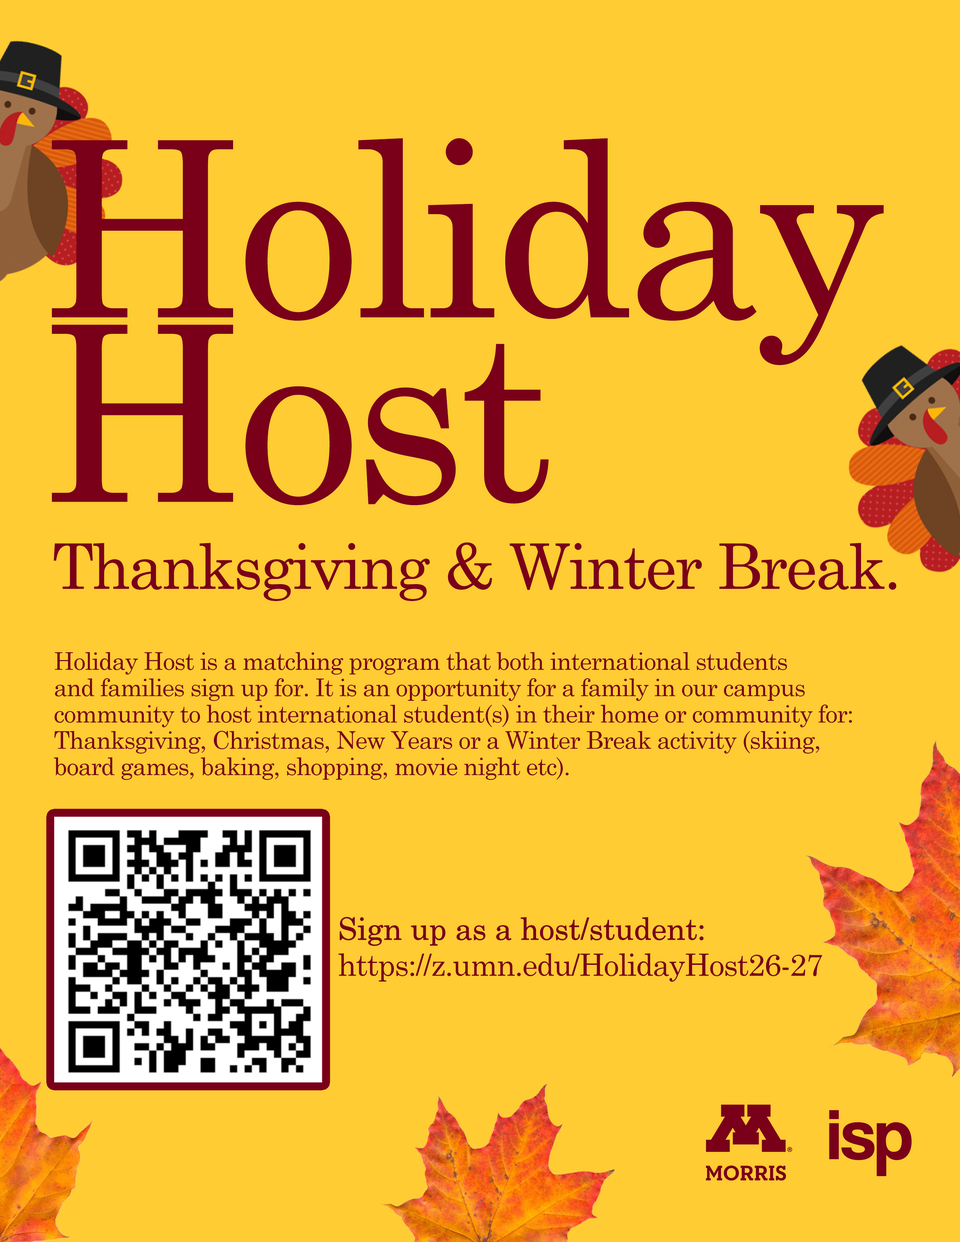
<style>
.page{position:relative;width:960px;height:1242px;background:#ffcc33}
.page>*{position:absolute;margin:0}
.t1{font:245.1px/184.6px "CenturySchoolbook";letter-spacing:-0.03em;color:#7a0019}
.t2{font:62.8px "CenturySchoolbook";letter-spacing:-0.03em;color:#7a0019}
.t3{font:24.4px/26.3px "CenturySchoolbook";letter-spacing:-0.03em;color:#7a0019}
.t4{font:30.8px/36px "CenturySchoolbook";letter-spacing:-0.03em;color:#7a0019}
.t5{font:30.8px/36px "CenturySchoolbook";letter-spacing:-0.03em;color:#7a0019;font-weight:bold}
.t6{font:72.7px "CoolveticaRg-Regular";letter-spacing:-0.03em;color:#7a0019;font-weight:bold}
</style>
<div class="page">
<p class="t1" style="left:52px;top:138px;width:832px;height:368px">Holiday<br>Host</p>
<p class="t2" style="left:53px;top:542px;width:843px;height:59px">Thanksgiving &amp; Winter Break.</p>
<p class="t3" style="left:54px;top:652px;width:798px;height:128px">Holiday Host is a matching program that both international students<br>and families sign up for. It is an opportunity for a family in our campus<br>community to host international student(s) in their home or community for:<br>Thanksgiving, Christmas, New Years or a Winter Break activity (skiing,<br>board games, baking, shopping, movie night etc).</p>
<p class="t4" style="left:338px;top:917px;width:484px;height:65px"><span class="t5">Sign up as a host/student:<br></span>https://z.umn.edu/HolidayHost26-27</p>
<p class="t6" style="left:829px;top:1110px;width:83px;height:66px">isp</p>
</div>
